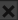
<style>
.page{position:relative;width:18px;height:20px;background:#414141}
.page>*{position:absolute;margin:0}
.t1{font:27.3px "Arial-BoldMT";letter-spacing:0.01em;color:#121111}
</style>
<div class="page">
<p class="t1" style="left:2px;top:5px;width:13px;height:13px">×</p>
</div>
